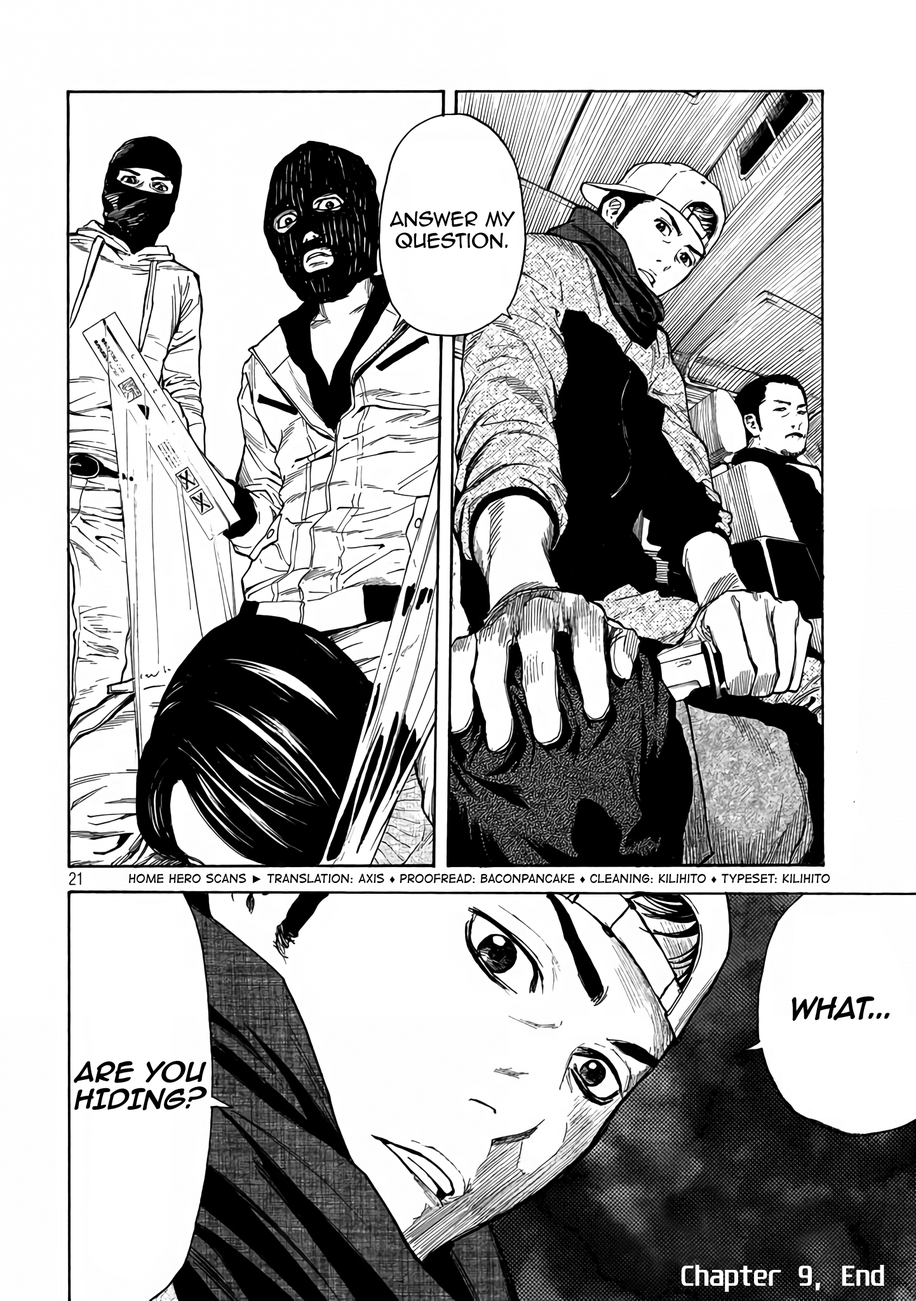
<style>
.page{position:relative;width:916px;height:1301px;background:#ffffff}
.page>*{position:absolute;margin:0}
.t1{font:18.1px "AnimeAce2.0BB";color:#000000}
.t2{font:11.3px "DigitalStrip";color:#000000}
.t3{font:11.3px "ArialMT";color:#000000}
.t4{font:24.9px "AnimeAce2.0BB-Bold";color:#000000}
.t5{font:22.6px "AnimeAce2.0BB-Bold";color:#000000}
.t6{font:24.9px "Unispace-Bold";color:#ffffff}
</style>
<div class="page">
<p class="t1" style="left:390px;top:210px;width:125px;height:39px;text-align:center">Answer My Question.</p>
<p class="t2" style="left:129px;top:874px;width:702px;height:10px">Home Hero Scans <span class="t3">►</span> Translation: Axis <span class="t3">♦</span> Proofread: BaconPancake <span class="t3">♦</span> cleaning: Kilihito <span class="t3">♦</span> Typeset: Kilihito</p>
<p class="t4" style="left:792px;top:996px;width:98px;height:25px">WHAT...</p>
<p class="t5" style="left:74px;top:1061px;width:133px;height:50px;text-align:center">ARE YOU HIDINg?</p>
<p class="t6" style="left:681px;top:1265px;width:204px;height:27px">Chapter 9, End</p>
</div>
